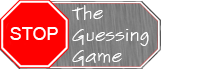
<style>
.page{position:relative;width:200px;height:70px;background:#ffffff}
.page>*{position:absolute;margin:0}
.t1{font:18px "SketchFlowPrint";color:#ffffff}
.t2{font:18px "ArialMT";color:#ffffff}
</style>
<div class="page">
<p class="t1" style="left:71px;top:5px;width:78px;height:61px">The<br>Guessing<br>Game</p>
<p class="t2" style="left:10px;top:27px;width:48px;height:13px">STOP</p>
</div>
